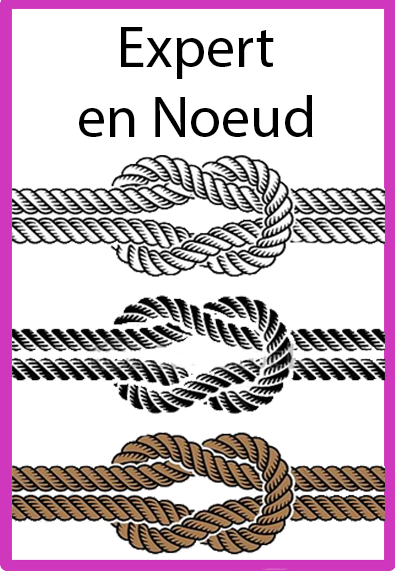
<style>
.page{position:relative;width:395px;height:571px;background:#ffffff}
.page>*{position:absolute;margin:0}
.t1{font:58.3px "MyriadPro-Regular";color:#000000}
</style>
<div class="page">
<p class="t1" style="left:79px;top:27px;width:234px;height:110px;text-align:center">Expert<br>en Noeud</p>
</div>
